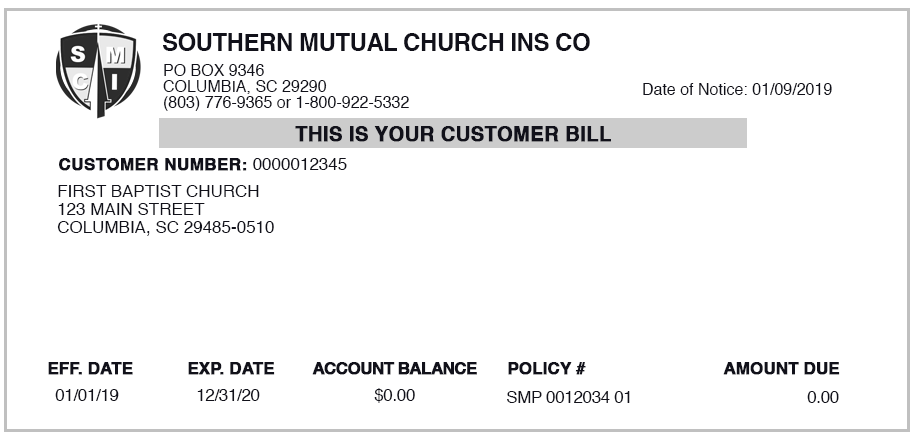
<style>
.page{position:relative;width:914px;height:442px;background:#ffffff}
.page>*{position:absolute;margin:0}
.t1{font:24px "Helvetica-Bold";letter-spacing:-0.02em;color:#11111a;text-transform:uppercase}
.t2{font:16px/16px "Helvetica";color:#11111a;text-transform:uppercase}
.t3{font:16px/16px "Helvetica";color:#11111a}
.t4{font:16px "Helvetica";color:#11111a}
.t5{font:20px "Helvetica-Bold";color:#11111a;text-transform:uppercase;font-weight:bold}
.t6{font:17px "Helvetica-Bold";color:#11111a;text-transform:uppercase;font-weight:bold}
.t7{font:17px "Helvetica";color:#11111a;text-transform:uppercase}
.t8{font:17px/18px "Helvetica";color:#11111a;text-transform:uppercase}
.t9{font:17px "Helvetica-Bold";letter-spacing:-0.02em;color:#11111a;text-transform:uppercase;font-weight:bold}
.t10{font:17px "Helvetica-Bold";letter-spacing:-0.06em;color:#11111a;text-transform:uppercase;font-weight:bold}
.t11{font:17px "Helvetica";letter-spacing:-0.02em;color:#11111a;text-transform:uppercase}
</style>
<div class="page">
<p class="t1" style="left:163px;top:33px;width:427px;height:18px">southern mutual church ins co</p>
<p class="t2" style="left:163px;top:64px;width:246px;height:47px">PO box 9346<br>Columbia, SC 29290<br>(803) 776-9365 <span class="t3">or</span> 1-800-922-5332</p>
<p class="t4" style="left:643px;top:83px;width:189px;height:12px">Date of Notice: 01/09/2019</p>
<p class="t5" style="left:295px;top:126px;width:316px;height:16px">this is your customer bill</p>
<p class="t6" style="left:59px;top:158px;width:288px;height:13px">customer number: <span class="t7">0000012345</span></p>
<p class="t8" style="left:57px;top:185px;width:217px;height:51px">First Baptist Church<br>123 Main Street<br>Columbia, SC 29485-0510</p>
<p class="t9" style="left:48px;top:362px;width:85px;height:13px">eff. date</p>
<p class="t9" style="left:188px;top:362px;width:87px;height:13px">exp. date</p>
<p class="t10" style="left:312px;top:362px;width:165px;height:13px">account balance</p>
<p class="t9" style="left:508px;top:362px;width:78px;height:13px">policy #</p>
<p class="t9" style="left:723px;top:362px;width:117px;height:13px">amount due</p>
<p class="t11" style="left:55px;top:389px;width:64px;height:12px">01/01/19</p>
<p class="t11" style="left:197px;top:389px;width:63px;height:12px">12/31/20</p>
<p class="t11" style="left:374px;top:388px;width:41px;height:15px">$0.00</p>
<p class="t11" style="left:507px;top:391px;width:123px;height:12px">SMP 0012034 01</p>
<p class="t11" style="left:807px;top:391px;width:32px;height:12px">0.00</p>
</div>
